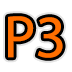
<style>
.page{position:relative;width:72px;height:72px;background:#ffffff}
.page>*{position:absolute;margin:0}
.t1{font:60px "MyriadPro-Regular";color:#ff6f00}
</style>
<div class="page">
<p class="t1" style="left:8px;top:16px;width:55px;height:42px">P3</p>
</div>
